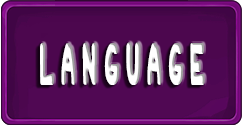
<style>
.page{position:relative;width:243px;height:125px;background:#4c074e}
.page>*{position:absolute;margin:0}
.t1{font:84px "HilariousComicslight";letter-spacing:0.24em;color:#ffffff;font-variant:small-caps;font-weight:bold;scale:0.45 1}
</style>
<div class="page">
<p class="t1" style="left:40px;top:42px;width:165px;height:43px">language</p>
</div>
